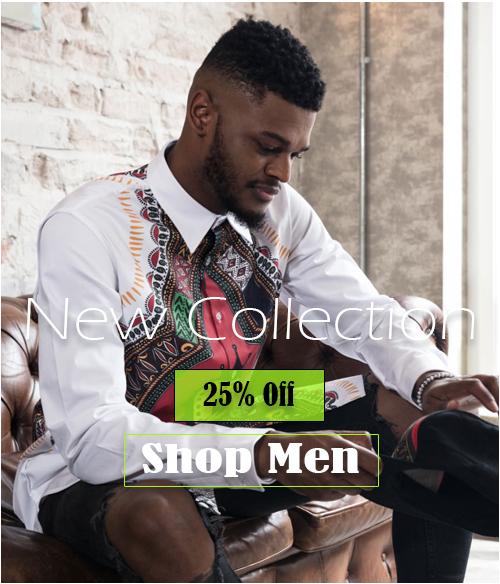
<style>
.page{position:relative;width:500px;height:584px}
.page>*{position:absolute;margin:0}
.t1{font:61.9px "ErasITC-Light";color:#ffffff;scale:1.16 1}
.t2{font:30px "BernardMT-Condensed";color:#000000}
.t3{font:37.4px "BernardMT-Condensed";color:#ffffff;scale:1.63 1}
</style>
<div class="page">
<p class="t1" style="left:26px;top:297px;width:449px;height:43px">New Collection</p>
<p class="t2" style="left:203px;top:381px;width:92px;height:25px">25% Off</p>
<p class="t3" style="left:142px;top:443px;width:217px;height:34px">Shop Men</p>
</div>
